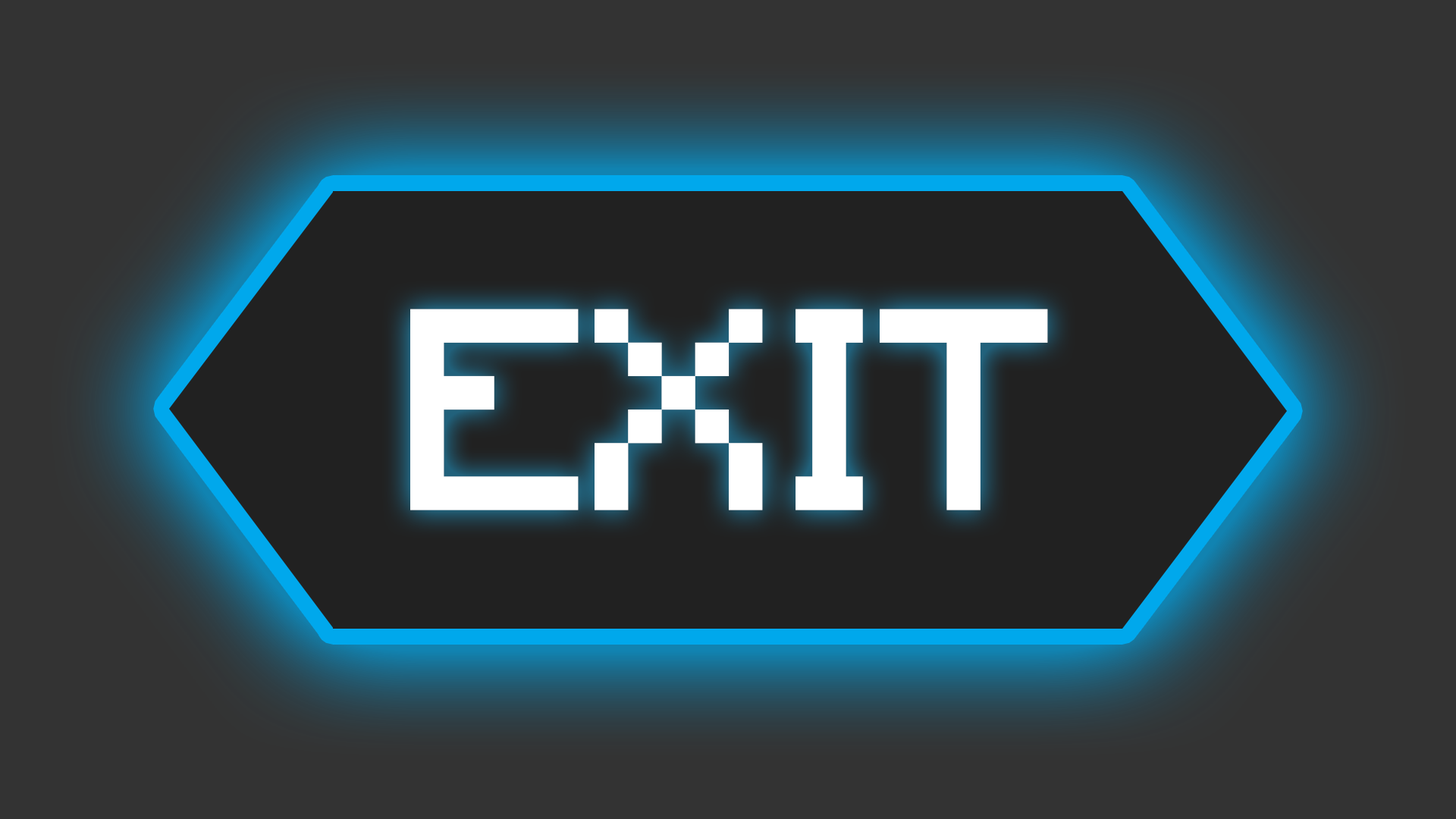
<style>
.page{position:relative;width:1456px;height:819px;background:#333333}
.page>*{position:absolute;margin:0}
.t1{font:267.9px "Minecraft";color:#ffffff}
</style>
<div class="page">
<p class="t1" style="left:410px;top:309px;width:638px;height:201px">EXIT</p>
</div>
